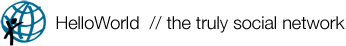
<style>
.page{position:relative;width:346px;height:46px;background:#ffffff}
.page>*{position:absolute;margin:0}
.t1{font:18px "HelveticaNeue-Light";color:#000000}
</style>
<div class="page">
<p class="t1" style="left:56px;top:16px;width:289px;height:17px">HelloWorld  // the truly social network</p>
</div>
